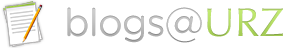
<style>
.page{position:relative;width:300px;height:48px;background:#ffffff}
.page>*{position:absolute;margin:0}
.t1{font:38.5px "GothamRounded-Book";letter-spacing:-0.025em;color:#a7a7a7}
.t2{font:40.1px "GothamRounded-Book";color:#a7a7a7}
.t3{font:40.1px "Optima-Regular";color:#9bc34b}
</style>
<div class="page">
<p class="t1" style="left:67px;top:7px;width:216px;height:36px">blogs<span class="t2">@</span><span class="t3">URZ</span></p>
<p class="t1" style="left:67px;top:7px;width:216px;height:36px">blogs<span class="t2">@</span><span class="t3">URZ</span></p>
</div>
